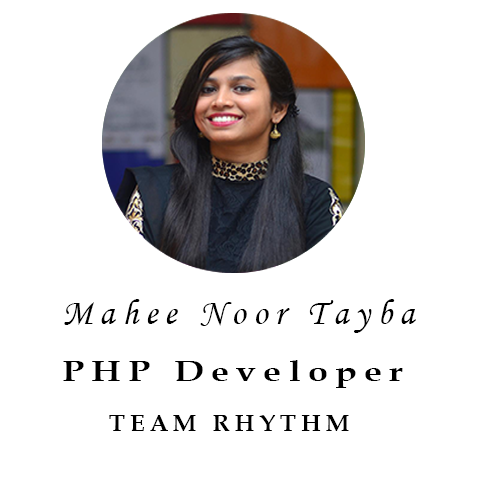
<style>
.page{position:relative;width:480px;height:480px;background:#ffffff}
.page>*{position:absolute;margin:0}
.t1{font:36.1px "MonotypeCorsiva";letter-spacing:0.2em;color:#000000}
.t2{font:28.9px "BookAntiqua-Bold";letter-spacing:0.2em;color:#000000;scale:1.24 1}
.t3{font:24px "BookAntiqua-Bold";letter-spacing:0.2em;color:#000000}
</style>
<div class="page">
<p class="t1" style="left:64px;top:299px;width:352px;height:34px">Mahee Noor Tayba</p>
<p class="t2" style="left:63px;top:360px;width:340px;height:28px">PHP Developer</p>
<p class="t3" style="left:109px;top:415px;width:240px;height:16px">TEAM RHYTHM</p>
</div>
